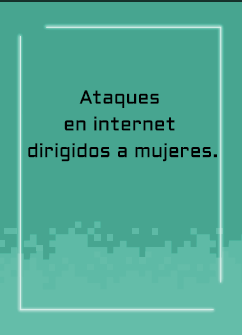
<style>
.page{position:relative;width:242px;height:335px;background:#47a590}
.page>*{position:absolute;margin:0}
.t1{font:19.2px/26.7px "Aldrich-Regular";letter-spacing:0.005em;color:#000000}
</style>
<div class="page">
<p class="t1" style="left:28px;top:90px;width:189px;height:72px;text-align:center">Ataques <br>en internet <br>dirigidos a mujeres.</p>
</div>
